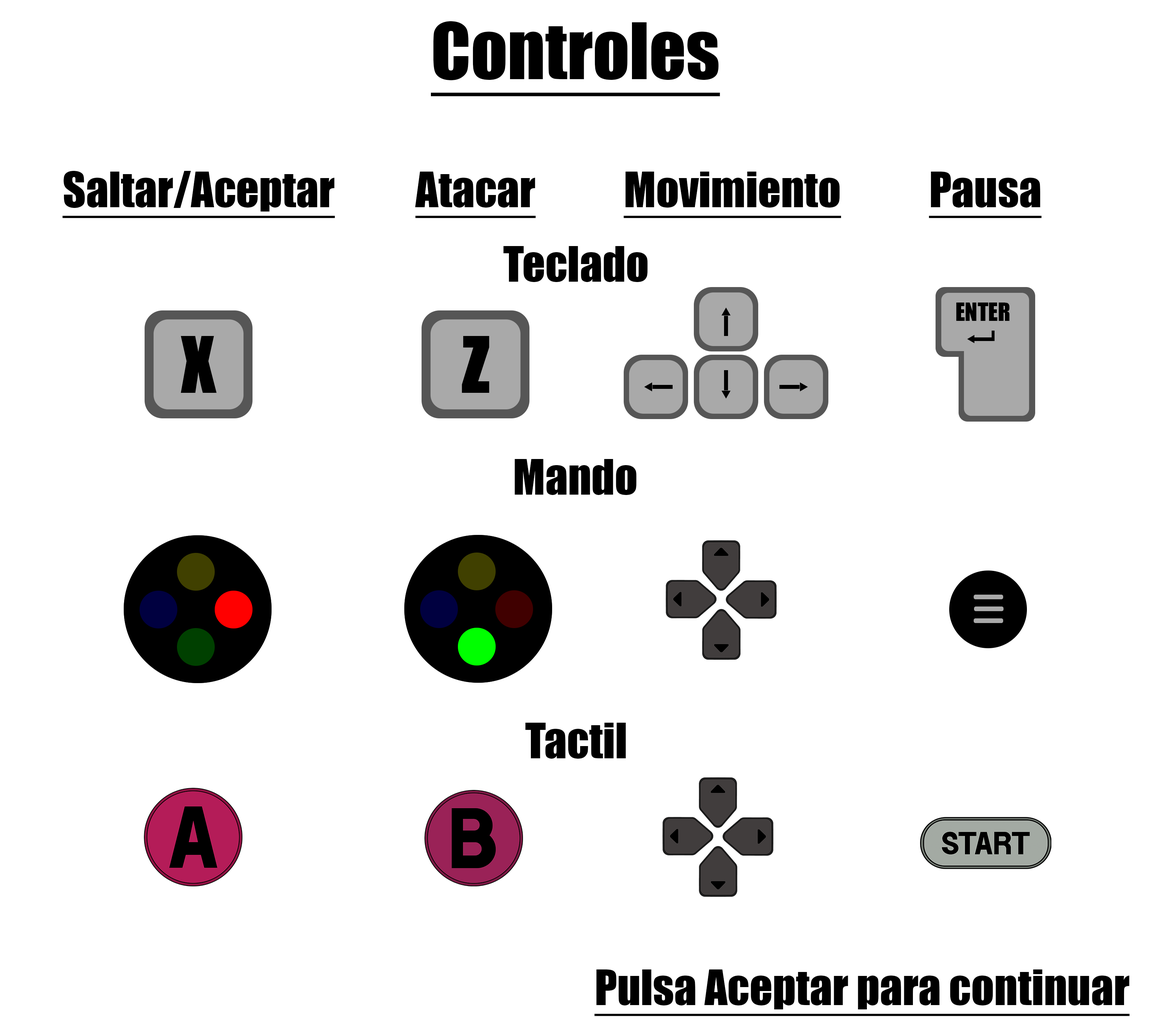
<style>
.page{position:relative;width:1151px;height:1036px;background:#ffffff}
.page>*{position:absolute;margin:0}
.t1{font:71.9px "Impact";color:#000000;text-decoration:underline}
.t2{font:45px "Impact";color:#000000;text-decoration:underline}
.t3{font:45px "Impact";color:#000000}
.t4{font:23.3px "Impact";color:#000000}
.t5{font:71.9px "Impact";color:#000000}
</style>
<div class="page">
<p class="t1" style="left:431px;top:21px;width:289px;height:75px">Controles</p>
<p class="t2" style="left:62px;top:171px;width:273px;height:47px">Saltar/Aceptar</p>
<p class="t2" style="left:415px;top:172px;width:121px;height:46px">Atacar</p>
<p class="t2" style="left:624px;top:172px;width:217px;height:46px">Movimiento</p>
<p class="t2" style="left:929px;top:172px;width:113px;height:46px">Pausa</p>
<p class="t3" style="left:503px;top:246px;width:145px;height:36px">Teclado</p>
<p class="t4" style="left:956px;top:303px;width:54px;height:18px">ENTER</p>
<p class="t5" style="left:181px;top:336px;width:36px;height:57px">X</p>
<p class="t5" style="left:462px;top:336px;width:27px;height:57px">Z</p>
<p class="t3" style="left:515px;top:459px;width:122px;height:36px">Mando</p>
<p class="t3" style="left:525px;top:723px;width:101px;height:36px">Tactil</p>
<p class="t2" style="left:594px;top:969px;width:536px;height:47px">Pulsa Aceptar para continuar</p>
</div>
